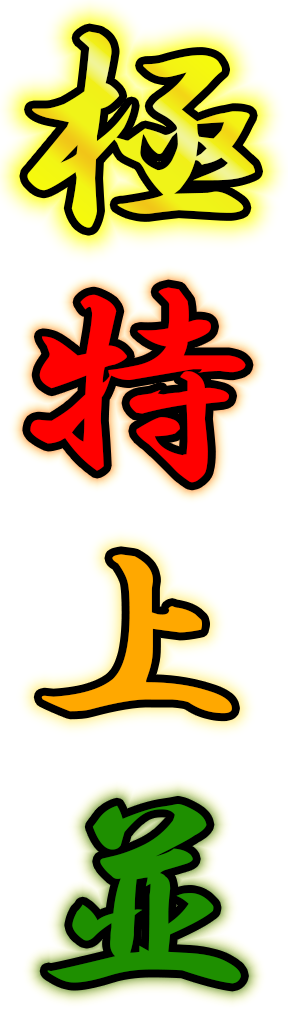
<style>
.page{position:relative;width:288px;height:1024px;background:#ffffff}
.page>*{position:absolute;margin:0}
.t1{font:232px "HGSGyoshotai";letter-spacing:-0.1em;scale:1.06 1}
.t2{font:232px "HGSGyoshotai";letter-spacing:-0.1em;color:#ff0000;scale:1.06 1}
.t3{font:224px "HGSGyoshotai";letter-spacing:-0.1em;color:#ff0000;scale:1.06 1}
.t4{font:232px "HGSGyoshotai";letter-spacing:-0.1em;color:#ffa800;scale:1.06 1}
.t5{font:224px "HGSGyoshotai";letter-spacing:-0.1em;color:#1e8f00;scale:1.06 1}
</style>
<div class="page">
<p class="t1" style="left:27px;top:31px;width:228px;height:197px">極極</p>
<p class="t2" style="left:30px;top:287px;width:216px;height:196px">特<span class="t3">特</span></p>
<p class="t4" style="left:41px;top:554px;width:191px;height:160px">上上</p>
<p class="t5" style="left:47px;top:804px;width:194px;height:180px">並</p>
</div>
